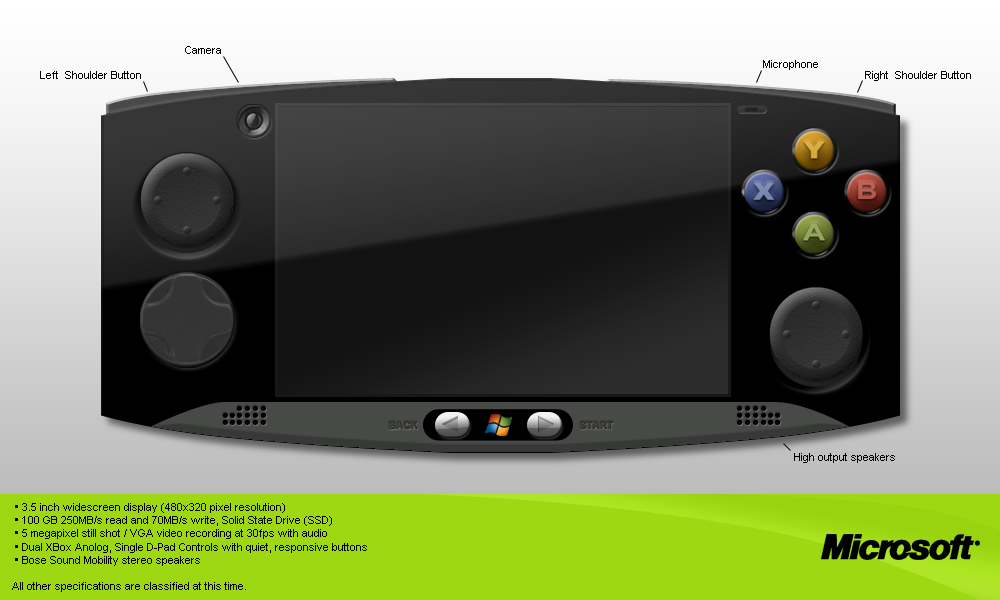
<style>
.page{position:relative;width:1000px;height:600px}
.page>*{position:absolute;margin:0}
.t1{font:11px "ArialMT";color:#000000}
.t2{font:10px "Arial-BoldMT";color:#2f312f}
.t3{font:10px "Arial-BoldMT";color:#313231}
</style>
<div class="page">
<p class="t1" style="left:185px;top:46px;width:36px;height:8px">Camera</p>
<p class="t1" style="left:763px;top:60px;width:55px;height:10px">Microphone</p>
<p class="t1" style="left:40px;top:71px;width:101px;height:8px">Left  Shoulder Button</p>
<p class="t1" style="left:865px;top:71px;width:106px;height:10px">Right  Shoulder Button</p>
<p class="t2" style="left:389px;top:421px;width:29px;height:8px">BACK</p>
<p class="t3" style="left:580px;top:421px;width:33px;height:8px">START</p>
<p class="t1" style="left:794px;top:453px;width:101px;height:10px">High output speakers</p>
<p class="t1" style="left:12px;top:503px;width:355px;height:89px">• 3.5 inch widescreen display (480x320 pixel resolution)<br> • 100 GB 250MB/s read and 70MB/s write, Solid State Drive (SSD)<br> • 5 megapixel still shot / VGA video recording at 30fps with audio<br> • Dual XBox Anolog, Single D-Pad Controls with quiet, responsive buttons<br> • Bose Sound Mobility stereo speakers<br><br>All other specifications are classified at this time.</p>
</div>
